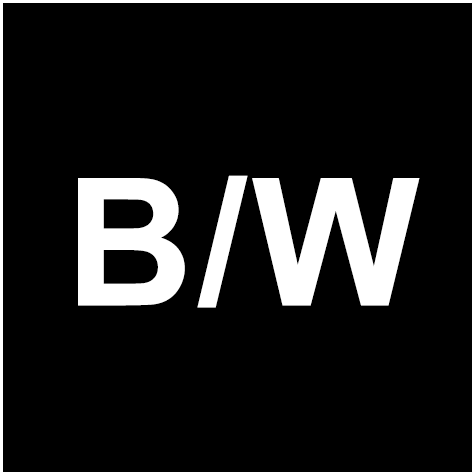
<style>
.page{position:relative;width:475px;height:475px;background:#000000}
.page>*{position:absolute;margin:0}
.t1{font:177.8px "Arial-BoldMT";letter-spacing:0.025em;color:#ffffff;font-variant:small-caps}
</style>
<div class="page">
<p class="t1" style="left:78px;top:175px;width:342px;height:133px">B/W</p>
</div>
